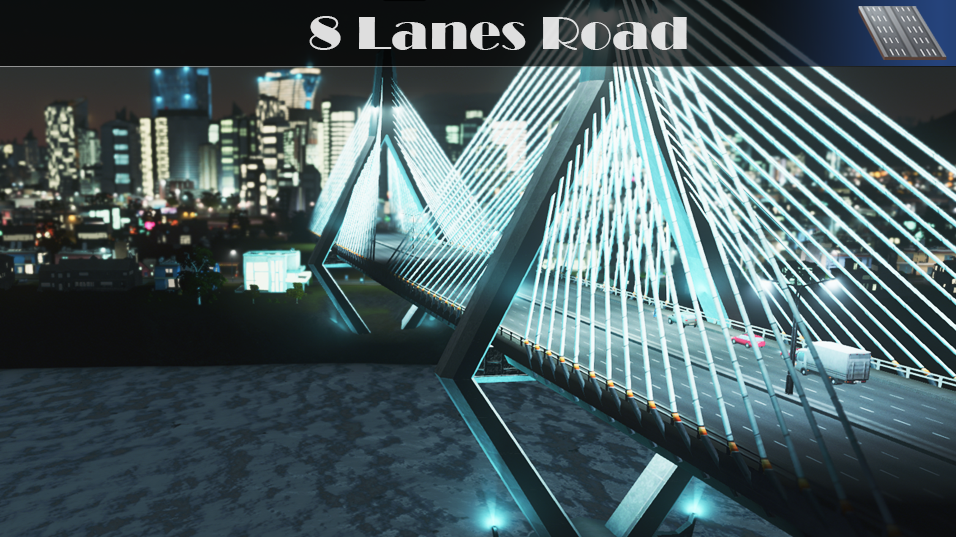
<style>
.page{position:relative;width:956px;height:537px}
.page>*{position:absolute;margin:0}
.t1{font:48px "Broadway";color:#dedede;scale:1.11 1}
</style>
<div class="page">
<p class="t1" style="left:309px;top:16px;width:378px;height:34px">8 Lanes Road</p>
</div>
